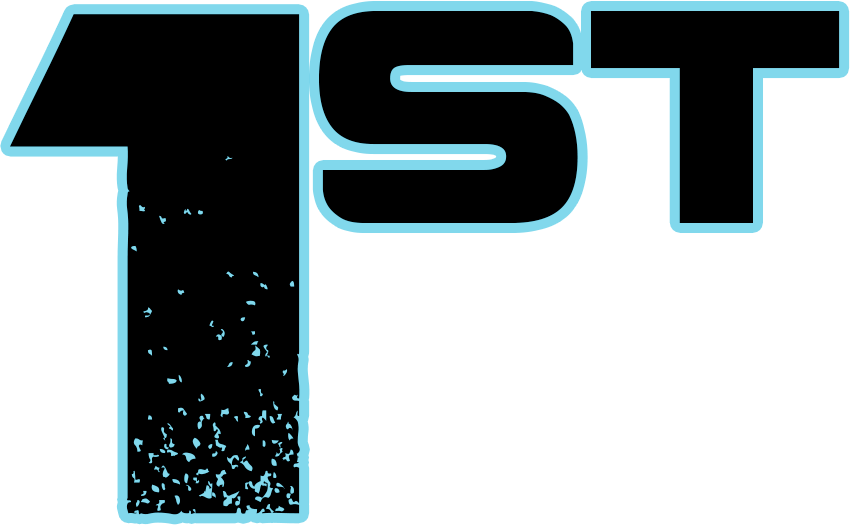
<style>
.page{position:relative;width:850px;height:525px;background:#ffffff}
.page>*{position:absolute;margin:0}
.t1{font:700px "Coalition";color:#000000}
.t2{font:300px "Coalition";color:#000000}
</style>
<div class="page">
<p class="t1" style="left:10px;top:14px;width:290px;height:501px">1</p>
<p class="t2" style="left:319px;top:11px;width:521px;height:212px">st</p>
</div>
